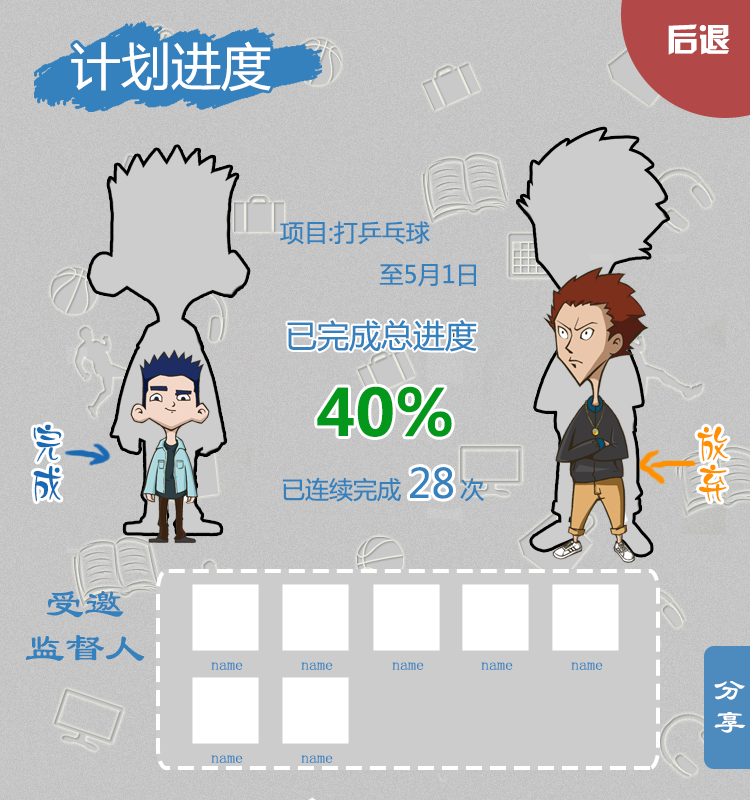
<style>
.page{position:relative;width:750px;height:800px}
.page>*{position:absolute;margin:0}
.t1{font:50.2px "MicrosoftYaHei";color:#ffffff}
.t2{font:24px "MicrosoftYaHei";color:#3581bd}
.t3{font:32px "MicrosoftYaHei";color:#3581bd}
.t4{font:64px "MicrosoftYaHei-Bold";color:#03981c}
.t5{font:40px "HYr3gj";color:#1a69b3}
.t6{font:40px "HYr3gj";color:#ff9000}
.t7{font:40px "MicrosoftYaHei";color:#3581bd}
.t8{font:40px "LiSu";color:#3581bd}
.t9{font:16px "LiSu";color:#3581bd}
.t10{font:32px "LiSu";color:#ffffff}
</style>
<div class="page">
<p class="t1" style="left:71px;top:41px;width:200px;height:50px">计划进度</p>
<p class="t2" style="left:280px;top:221px;width:196px;height:66px">项目:打乒乓球<br>              至5月1日</p>
<p class="t3" style="left:287px;top:320px;width:190px;height:32px">已完成总进度</p>
<p class="t4" style="left:317px;top:386px;width:135px;height:51px">40%</p>
<p class="t5" style="left:33px;top:424px;width:29px;height:78px">完成</p>
<p class="t6" style="left:697px;top:426px;width:31px;height:76px">放弃</p>
<p class="t7" style="left:410px;top:467px;width:43px;height:32px">28</p>
<p class="t2" style="left:282px;top:477px;width:202px;height:25px">已连续完成     次</p>
<p class="t8" style="left:46px;top:591px;width:78px;height:27px">受邀</p>
<p class="t8" style="left:25px;top:635px;width:120px;height:26px">监督人</p>
<p class="t9" style="left:211px;top:662px;width:32px;height:8px">name</p>
<p class="t9" style="left:301px;top:662px;width:32px;height:8px">name</p>
<p class="t9" style="left:392px;top:662px;width:32px;height:8px">name</p>
<p class="t9" style="left:481px;top:662px;width:32px;height:8px">name</p>
<p class="t9" style="left:571px;top:662px;width:32px;height:8px">name</p>
<p class="t10" style="left:714px;top:681px;width:32px;height:52px">分享</p>
<p class="t9" style="left:211px;top:755px;width:32px;height:8px">name</p>
<p class="t9" style="left:301px;top:755px;width:32px;height:8px">name</p>
</div>
